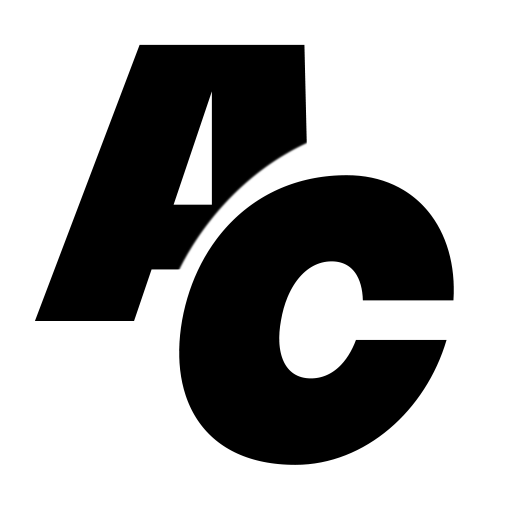
<style>
.page{position:relative;width:512px;height:512px;background:#ffffff}
.page>*{position:absolute;margin:0}
.t1{font:298.2px "DanburyCapsPERSONALUSE-Regular";color:#000000}
.t2{font:287px "DanburyCapsPERSONALUSE-Regular";color:#000000}
</style>
<div class="page">
<p class="t1" style="left:34px;top:44px;width:277px;height:277px">a</p>
<p class="t2" style="left:179px;top:175px;width:275px;height:290px">c</p>
</div>
